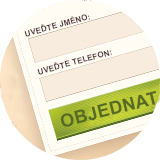
<style>
.page{position:relative;width:160px;height:160px;background:#fffcf4}
.page>*{position:absolute;margin:0}
.t1{font:8px "Arial-BoldMT";letter-spacing:0.02em;color:#50383d;text-transform:uppercase}
.t2{font:18px "Arial-BoldMT";letter-spacing:0.02em;color:#566a23;text-transform:uppercase}
</style>
<div class="page">
<p class="t1" style="left:24px;top:14px;width:66px;height:23px;rotate:-15deg">Uveďte jméno:</p>
<p class="t1" style="left:37px;top:50px;width:75px;height:25px;rotate:-15deg">Uveďte telefon:</p>
<p class="t2" style="left:60px;top:90px;width:97px;height:37px;rotate:-14deg">OBJEDNAT</p>
</div>
